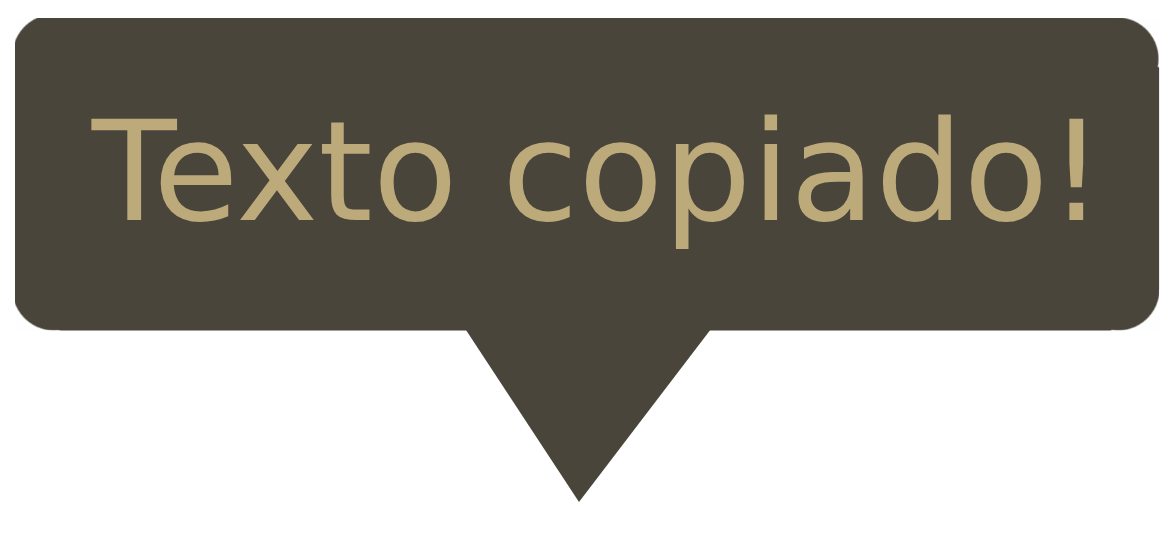
<style>
.page{position:relative;width:1173px;height:542px;background:#49453a}
.page>*{position:absolute;margin:0}
.t1{font:138.9px "DejaVuSans";color:#bdaa7b}
</style>
<div class="page">
<p class="t1" style="left:91px;top:114px;width:993px;height:135px">Texto copiado!</p>
</div>
